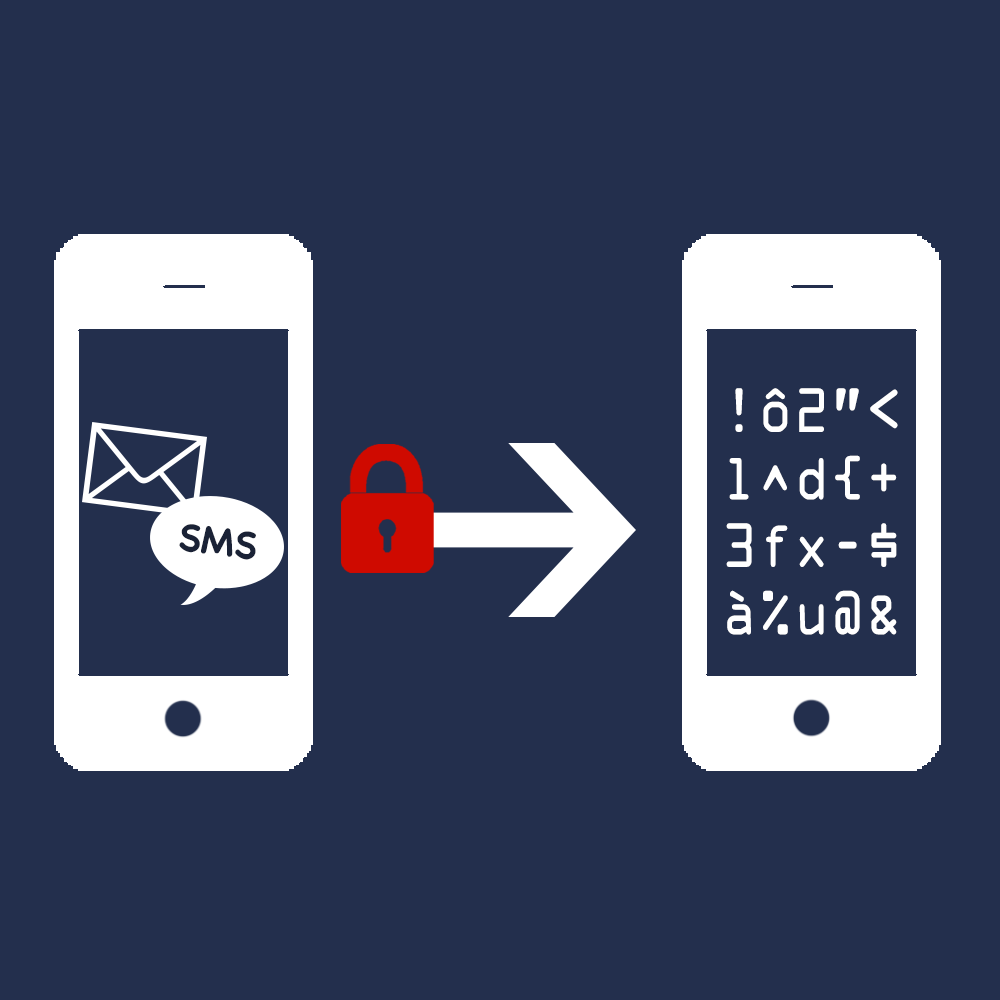
<style>
.page{position:relative;width:1000px;height:1000px;background:#232f4d}
.page>*{position:absolute;margin:0}
.t1{font:56.2px "OCRAStd";color:#ffffff;scale:0.89 1}
.t2{font:38.5px "Chalkboard-Bold";color:#1a2236}
</style>
<div class="page">
<p class="t1" style="left:726px;top:388px;width:172px;height:247px;text-align:center">!ô2”&lt;<br>l^d{+<br>3fx-$<br>à%u@&amp;</p>
<p class="t2" style="left:179px;top:524px;width:77px;height:36px;rotate:7deg">SMS</p>
</div>
